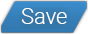
<style>
.page{position:relative;width:88px;height:34px}
.page>*{position:absolute;margin:0}
.t1{font:22px "Roboto-Light";color:#ffffff}
</style>
<div class="page">
<p class="t1" style="left:21px;top:8px;width:46px;height:16px">Save</p>
</div>
